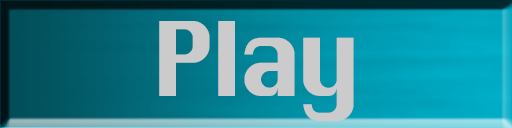
<style>
.page{position:relative;width:512px;height:128px}
.page>*{position:absolute;margin:0}
.t1{font:100px "Krungthep";letter-spacing:-0.075em;color:#cbcbcb}
</style>
<div class="page">
<p class="t1" style="left:159px;top:21px;width:195px;height:100px">Play</p>
</div>
